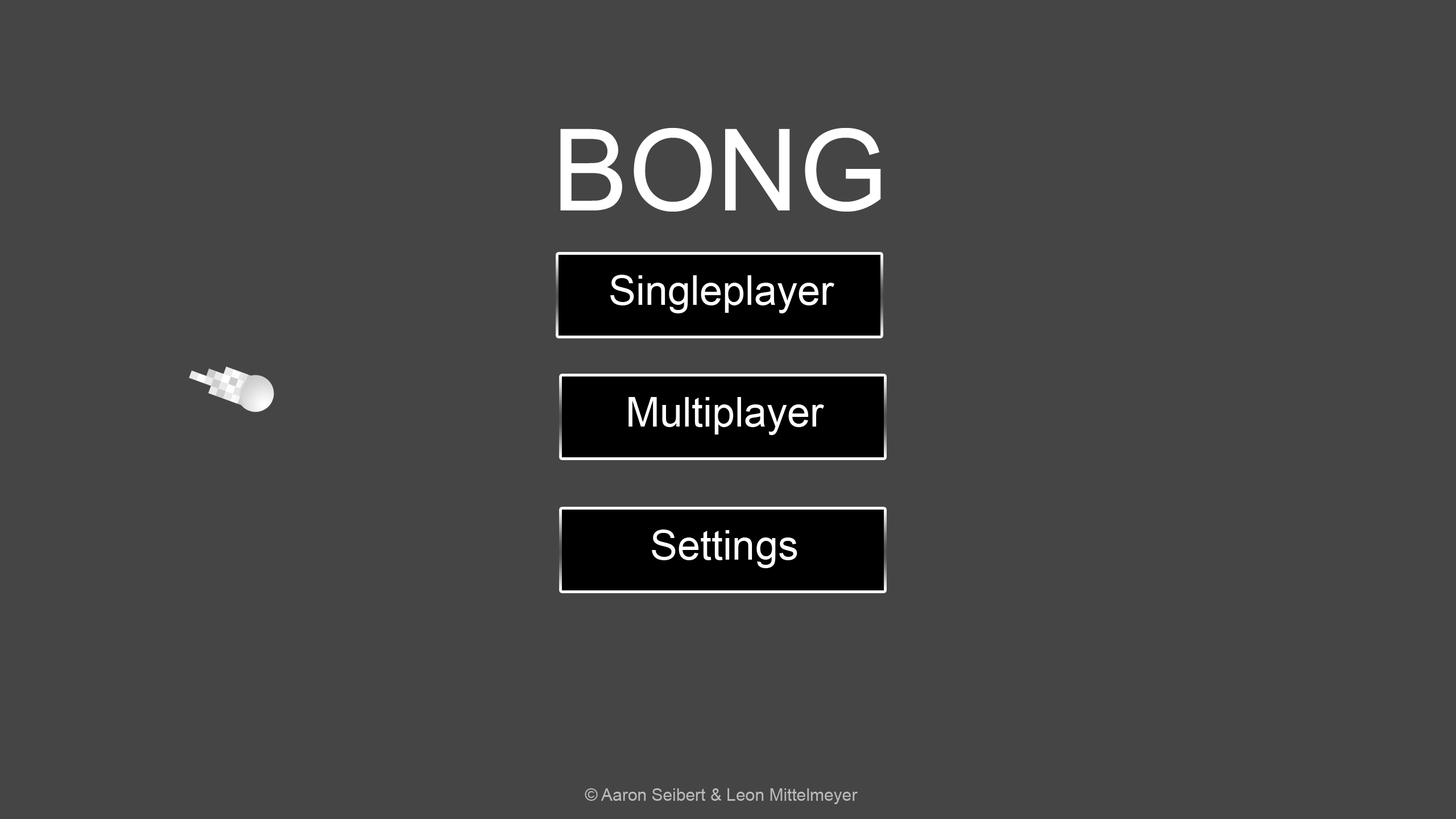
<style>
.page{position:relative;width:1456px;height:819px;background:#454545}
.page>*{position:absolute;margin:0}
.t1{font:113.8px "ArialMT";color:#ffffff}
.t2{font:41px "ArialMT";color:#ffffff}
.t3{font:17.1px "ArialMT";color:#bababa}
</style>
<div class="page">
<p class="t1" style="left:560px;top:127px;width:321px;height:85px">BONG</p>
<p class="t2" style="left:610px;top:275px;width:224px;height:38px">Singleplayer</p>
<p class="t2" style="left:628px;top:397px;width:196px;height:38px">Multiplayer</p>
<p class="t2" style="left:652px;top:529px;width:145px;height:39px">Settings</p>
<p class="t3" style="left:585px;top:788px;width:273px;height:16px">© Aaron Seibert &amp; Leon Mittelmeyer</p>
</div>
